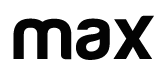
<style>
.page{position:relative;width:168px;height:76px;background:#ffffff}
.page>*{position:absolute;margin:0}
.t1{font:75px "HarabaraMaisBold-HarabaraMaisBold";color:#030303}
</style>
<div class="page">
<p class="t1" style="left:13px;top:15px;width:141px;height:45px">max</p>
</div>
